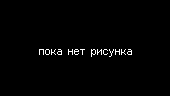
<style>
.page{position:relative;width:170px;height:96px;background:#000000}
.page>*{position:absolute;margin:0}
.t1{font:18.7px "Silver";letter-spacing:0.005em;color:#ffffff}
</style>
<div class="page">
<p class="t1" style="left:39px;top:49px;width:93px;height:8px">пока нет рисунка</p>
</div>
